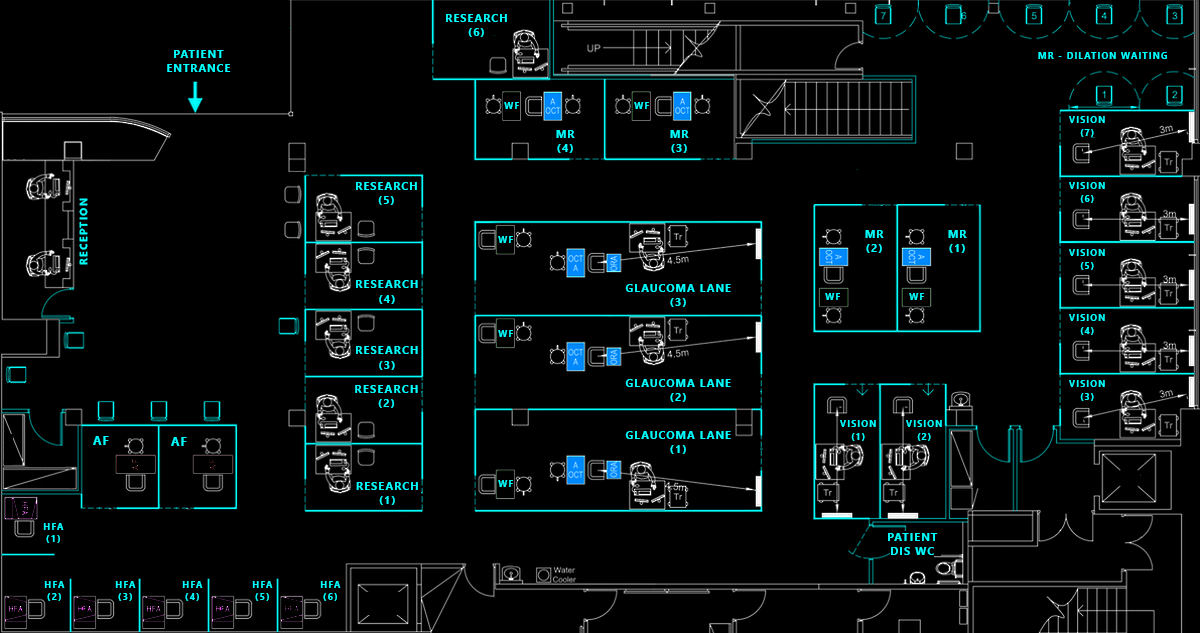
<style>
.page{position:relative;width:1200px;height:633px;background:#000000}
.page>*{position:absolute;margin:0}
.t1{font:10.6px/7.1px "SegoeUI-Bold";letter-spacing:0.12em;color:#00ffff}
.t2{font:9px "SegoeUI-Bold";letter-spacing:0.12em;color:#00ffff}
.t3{font:9.1px "SegoeUI-Bold";letter-spacing:0.12em;color:#00ffff}
.t4{font:9px/6.1px "SegoeUI-Bold";letter-spacing:0.12em;color:#00ffff}
.t5{font:10.6px "SegoeUI-Bold";letter-spacing:0.12em;color:#00ffff}
.t6{font:10.7px/7.2px "SegoeUI-Bold";letter-spacing:0.12em;color:#00ffff}
.t7{font:10.9px/7.3px "SegoeUI-Bold";letter-spacing:0.12em;color:#00ffff}
.t8{font:11.6px "SegoeUI-Bold";letter-spacing:0.12em;color:#00ffff}
.t9{font:9.3px/6.3px "SegoeUI-Bold";letter-spacing:0.12em;color:#00ffff}
</style>
<div class="page">
<p class="t1" style="left:446px;top:14px;width:61px;height:23px;text-align:center">RESEARCH<br><br>(6)</p>
<p class="t1" style="left:167px;top:50px;width:64px;height:22px;text-align:center">PATIENT<br><br>ENTRANCE</p>
<p class="t2" style="left:1038px;top:52px;width:129px;height:7px">MR - DILATION WAITING</p>
<p class="t3" style="left:504px;top:102px;width:15px;height:7px">WF</p>
<p class="t3" style="left:634px;top:102px;width:15px;height:7px">WF</p>
<p class="t4" style="left:1069px;top:116px;width:36px;height:21px;text-align:center">VISION<br><br>(7)</p>
<p class="t1" style="left:556px;top:130px;width:19px;height:23px;text-align:center">MR<br><br>(4)</p>
<p class="t1" style="left:670px;top:130px;width:19px;height:23px;text-align:center">MR<br><br>(3)</p>
<p class="t1" style="left:356px;top:182px;width:61px;height:23px;text-align:center">RESEARCH<br><br>(5)</p>
<p class="t4" style="left:1069px;top:182px;width:36px;height:21px;text-align:center">VISION<br><br>(6)</p>
<p class="t5" style="left:79px;top:198px;width:9px;height:67px;rotate:-90deg">RECEPTION</p>
<p class="t1" style="left:865px;top:230px;width:19px;height:23px;text-align:center">MR<br><br>(2)</p>
<p class="t1" style="left:948px;top:230px;width:19px;height:23px;text-align:center">MR<br><br>(1)</p>
<p class="t3" style="left:498px;top:236px;width:15px;height:7px">WF</p>
<p class="t4" style="left:1069px;top:249px;width:36px;height:21px;text-align:center">VISION<br><br>(5)</p>
<p class="t6" style="left:356px;top:280px;width:62px;height:24px;text-align:center">RESEARCH<br><br>(4)</p>
<p class="t1" style="left:625px;top:284px;width:106px;height:23px;text-align:center">GLAUCOMA LANE<br><br>(3)<br><br>(5)</p>
<p class="t3" style="left:825px;top:293px;width:15px;height:7px">WF</p>
<p class="t3" style="left:909px;top:293px;width:15px;height:7px">WF</p>
<p class="t4" style="left:1069px;top:314px;width:36px;height:21px;text-align:center">VISION<br><br>(4)</p>
<p class="t3" style="left:498px;top:330px;width:15px;height:7px">WF</p>
<p class="t6" style="left:356px;top:346px;width:62px;height:24px;text-align:center">RESEARCH<br><br>(3)</p>
<p class="t7" style="left:355px;top:385px;width:63px;height:23px;text-align:center">RESEARCH<br><br>(2)</p>
<p class="t1" style="left:625px;top:379px;width:106px;height:23px;text-align:center">GLAUCOMA LANE<br><br>(2)<br><br>(5)</p>
<p class="t4" style="left:1069px;top:380px;width:36px;height:21px;text-align:center">VISION<br><br>(3)</p>
<p class="t4" style="left:840px;top:420px;width:36px;height:21px;text-align:center">VISION<br><br>(1)</p>
<p class="t4" style="left:906px;top:420px;width:36px;height:21px;text-align:center">VISION<br><br>(2)</p>
<p class="t8" style="left:93px;top:436px;width:16px;height:9px">AF</p>
<p class="t8" style="left:171px;top:437px;width:16px;height:9px">AF</p>
<p class="t1" style="left:625px;top:431px;width:106px;height:23px;text-align:center">GLAUCOMA LANE<br><br>(1)<br><br>(5)</p>
<p class="t1" style="left:356px;top:482px;width:62px;height:23px;text-align:center">RESEARCH<br><br>(1)</p>
<p class="t3" style="left:498px;top:480px;width:15px;height:7px">WF</p>
<p class="t9" style="left:43px;top:523px;width:21px;height:20px;text-align:center">HFA<br><br>(1)</p>
<p class="t1" style="left:888px;top:533px;width:50px;height:22px;text-align:center">PATIENT<br><br>DIS WC</p>
<p class="t9" style="left:44px;top:581px;width:21px;height:20px;text-align:center">HFA<br><br>(2)</p>
<p class="t9" style="left:115px;top:581px;width:21px;height:20px;text-align:center">HFA<br><br>(3)</p>
<p class="t9" style="left:182px;top:581px;width:21px;height:20px;text-align:center">HFA<br><br>(4)</p>
<p class="t9" style="left:252px;top:581px;width:21px;height:20px;text-align:center">HFA<br><br>(5)</p>
<p class="t9" style="left:320px;top:581px;width:21px;height:20px;text-align:center">HFA<br><br>(6)</p>
</div>
